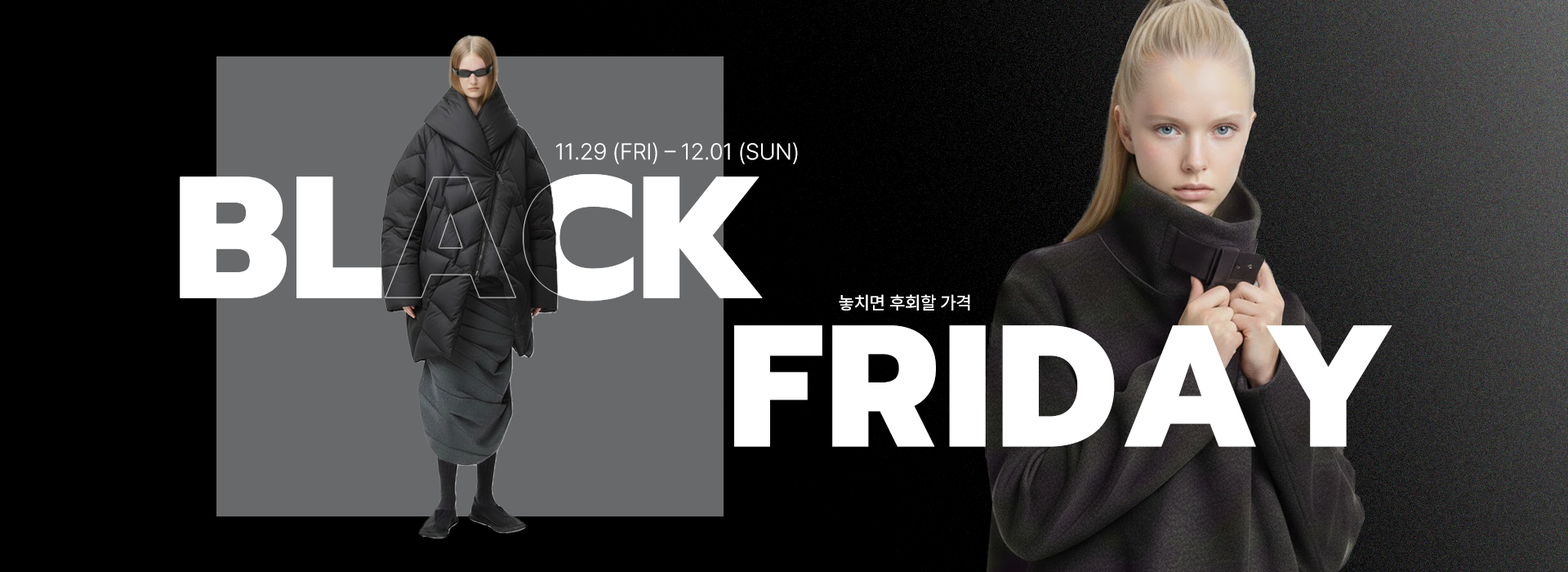
<style>
.page{position:relative;width:1568px;height:572px;background:#000000}
.page>*{position:absolute;margin:0}
.t1{font:22.9px "Pretendard-Light";color:#ffffff}
.t2{font:173.2px "Prompt-ExtraBold";color:#ffffff}
.t3{font:18px "Pretendard-Medium";color:#ffffff}
.t4{font:173.2px "Prompt-ExtraBold";letter-spacing:0.02em;color:#ffffff}
</style>
<div class="page">
<p class="t1" style="left:556px;top:142px;width:242px;height:22px">11.29 (FRI) – 12.01 (SUN)</p>
<p class="t2" style="left:180px;top:174px;width:583px;height:127px">BLACK</p>
<p class="t3" style="left:839px;top:294px;width:131px;height:16px">놓치면 후회할 가격</p>
<p class="t4" style="left:734px;top:325px;width:658px;height:122px">FRIDAY</p>
</div>
